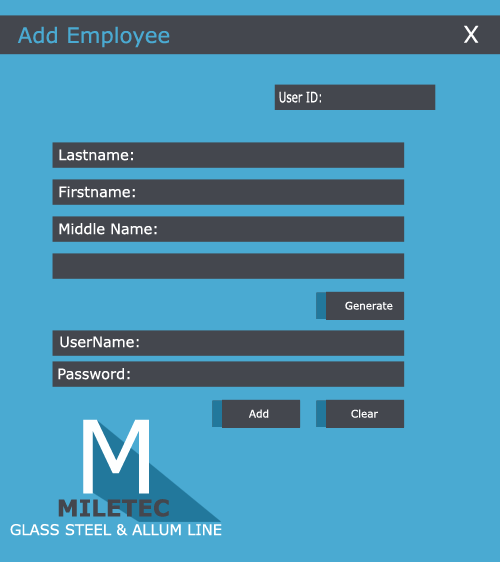
<style>
.page{position:relative;width:500px;height:562px;background:#4aaad2}
.page>*{position:absolute;margin:0}
.t1{font:21.3px "Verdana";color:#4aaad2}
.t2{font:23px "Verdana";color:#ffffff}
.t3{font:14.4px "Verdana";color:#ffffff;scale:0.71 1}
.t4{font:14.4px "Verdana";color:#ffffff}
.t5{font:10.4px "Verdana";color:#ffffff}
.t6{font:101.1px "Verdana";color:#feffff}
.t7{font:23px "Verdana-Bold";color:#44474e}
.t8{font:14.8px "Verdana";color:#ffffff}
</style>
<div class="page">
<p class="t1" style="left:17px;top:26px;width:153px;height:22px">Add Employee</p>
<p class="t2" style="left:464px;top:25px;width:15px;height:18px">X</p>
<p class="t3" style="left:279px;top:91px;width:42px;height:12px">User ID:</p>
<p class="t4" style="left:59px;top:149px;width:74px;height:12px">Lastname:</p>
<p class="t4" style="left:59px;top:186px;width:76px;height:12px">Firstname:</p>
<p class="t4" style="left:59px;top:223px;width:98px;height:12px">Middle Name:</p>
<p class="t5" style="left:345px;top:301px;width:48px;height:9px">Generate</p>
<p class="t4" style="left:60px;top:336px;width:79px;height:12px">UserName:</p>
<p class="t4" style="left:58px;top:368px;width:72px;height:12px">Password:</p>
<p class="t5" style="left:249px;top:409px;width:20px;height:9px">Add</p>
<p class="t5" style="left:351px;top:409px;width:27px;height:9px">Clear</p>
<p class="t6" style="left:83px;top:419px;width:66px;height:75px">M</p>
<p class="t7" style="left:58px;top:499px;width:111px;height:18px">MILETEC</p>
<p class="t8" style="left:10px;top:524px;width:212px;height:12px">GLASS STEEL &amp; ALLUM LINE</p>
</div>
